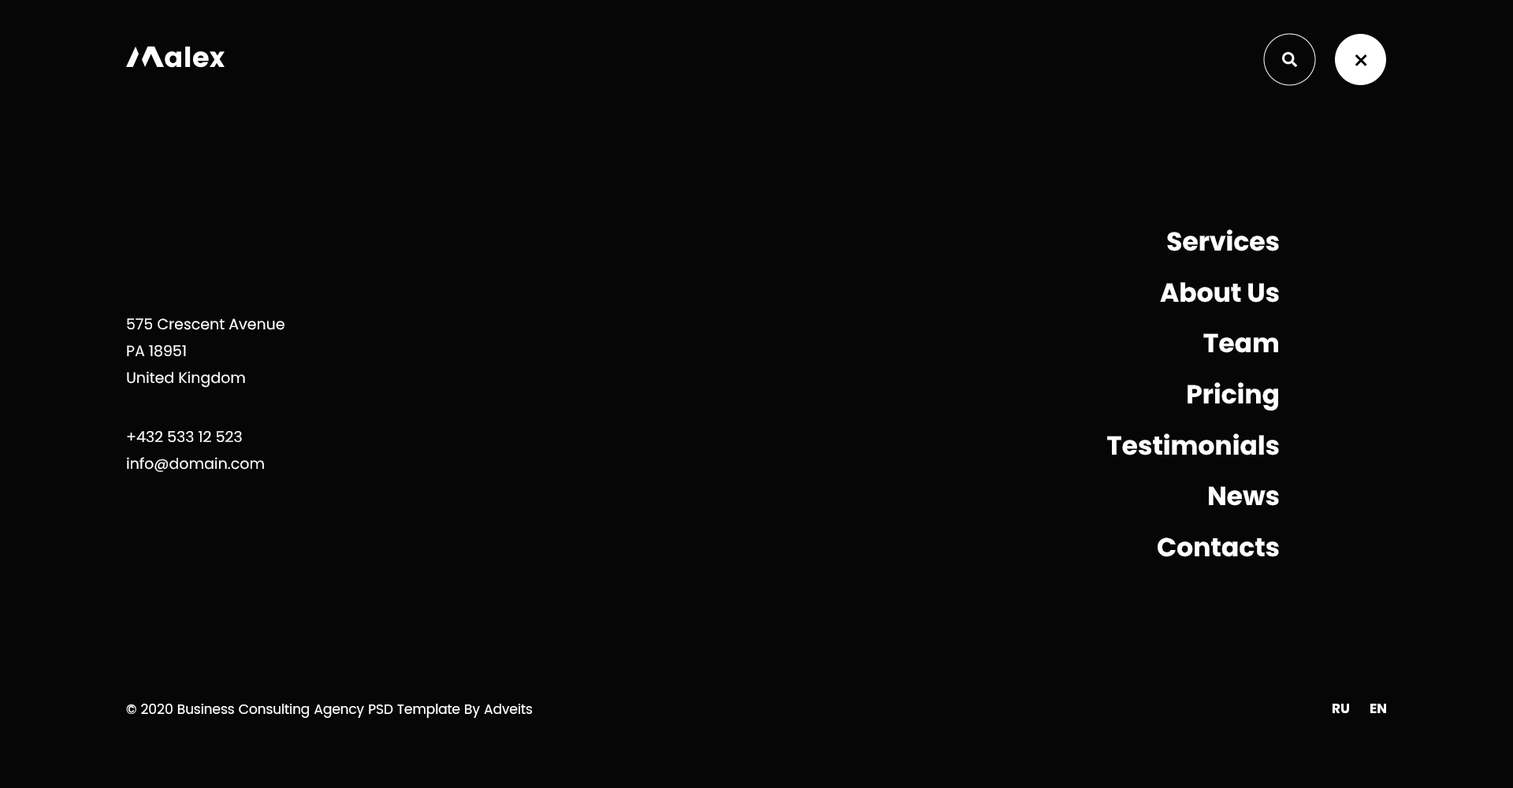
<style>
.page{position:relative;width:1513px;height:788px;background:#060606}
.page>*{position:absolute;margin:0}
.t1{font:26px "Poppins-Bold";color:#ffffff}
.t2{font:15px/26.8px "Poppins-Regular";color:#ffffff}
.t3{font:13.4px "Poppins-Regular";color:#ffffff}
.t4{font:13.4px "Poppins-Bold";color:#ffffff}
</style>
<div class="page">
<p class="t1" style="left:1167px;top:229px;width:112px;height:22px">Services</p>
<p class="t1" style="left:1160px;top:282px;width:119px;height:21px">About Us</p>
<p class="t2" style="left:127px;top:318px;width:157px;height:70px">575 Crescent Avenue<br>PA 18951<br>United Kingdom</p>
<p class="t1" style="left:1203px;top:333px;width:75px;height:20px">Team</p>
<p class="t1" style="left:1188px;top:382px;width:90px;height:29px">Pricing</p>
<p class="t2" style="left:127px;top:431px;width:137px;height:41px">+432 533 12 523<br>info@domain.com</p>
<p class="t1" style="left:1107px;top:433px;width:172px;height:23px">Testimonials</p>
<p class="t1" style="left:1209px;top:486px;width:70px;height:20px">News</p>
<p class="t1" style="left:1158px;top:537px;width:121px;height:20px">Contacts</p>
<p class="t3" style="left:126px;top:704px;width:407px;height:14px">© 2020 Business Consulting Agency PSD Template By Adveits</p>
<p class="t4" style="left:1333px;top:704px;width:16px;height:9px">RU</p>
<p class="t4" style="left:1370px;top:704px;width:16px;height:9px">EN</p>
</div>
